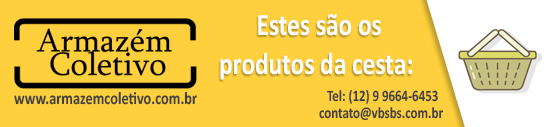
<style>
.page{position:relative;width:549px;height:127px;background:#fed03d}
.page>*{position:absolute;margin:0}
.t1{font:31.3px/39.8px "Calibri-Bold";color:#ffffff;scale:0.81 1}
.t2{font:16px "Calibri-Bold";color:#414141;scale:0.81 1}
.t3{font:17.8px "Calibri-Bold";color:#414141;scale:0.8 1}
</style>
<div class="page">
<p class="t1" style="left:220px;top:14px;width:192px;height:66px;text-align:center">Estes são os<br>produtos da cesta:</p>
<p class="t2" style="left:327px;top:89px;width:111px;height:15px">Tel: (12) 9 9664-6453</p>
<p class="t3" style="left:14px;top:91px;width:183px;height:14px">www.armazemcoletivo.com.br</p>
<p class="t2" style="left:319px;top:107px;width:125px;height:14px">contato@vbsbs.com.br</p>
</div>
